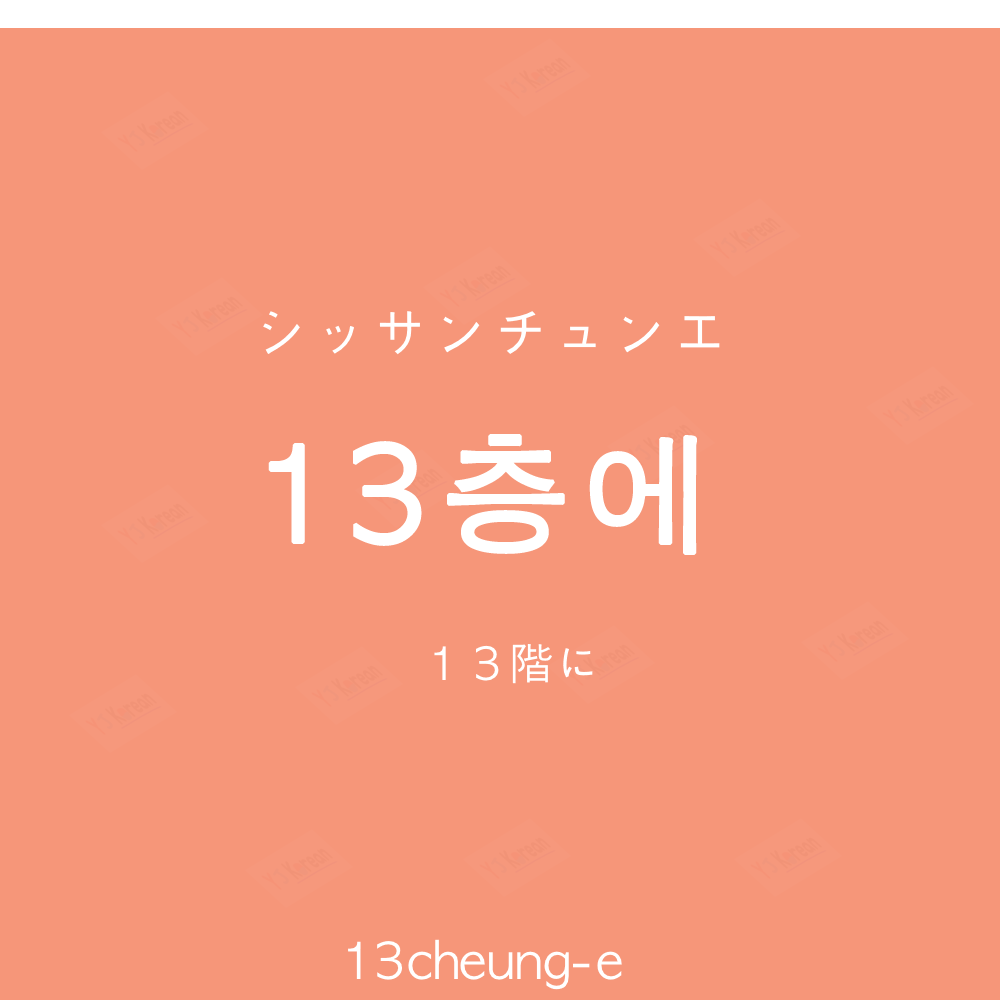
<style>
.page{position:relative;width:1000px;height:1000px;background:#f69679}
.page>*{position:absolute;margin:0}
.t1{font:60px "AppleGothic";color:#ffffff}
.t2{font:130px "AppleGothic";letter-spacing:0.04em;color:#ffffff;font-weight:bold}
.t3{font:45px "AppleGothic";color:#ffffff}
.t4{font:50px "AppleGothic";color:#ffffff}
</style>
<div class="page">
<p class="t1" style="left:263px;top:311px;width:457px;height:44px">シッサンチュンエ</p>
<p class="t2" style="left:268px;top:434px;width:429px;height:121px">13층에</p>
<p class="t3" style="left:434px;top:644px;width:159px;height:40px">１３階に</p>
<p class="t4" style="left:348px;top:939px;width:274px;height:51px">13cheung-e</p>
</div>
